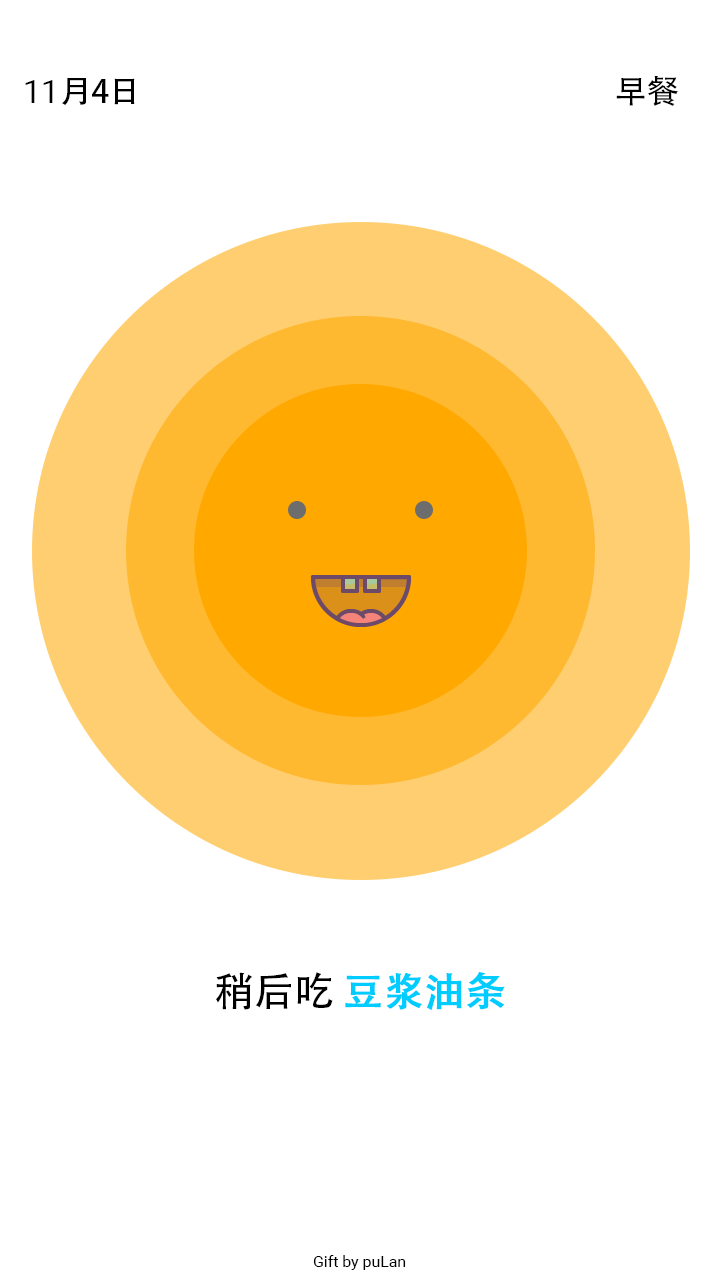
<style>
.page{position:relative;width:720px;height:1280px;background:#ffffff}
.page>*{position:absolute;margin:0}
.t1{font:32px "AdobeHeitiStd-Regular";letter-spacing:-0.004em;color:#000000}
.t2{font:32px "Roboto-Regular";letter-spacing:-0.004em;color:#000000}
.t3{font:40px "AdobeHeitiStd-Regular";letter-spacing:-0.004em;color:#00ccff;font-weight:bold}
.t4{font:40px "AdobeHeitiStd-Regular";letter-spacing:-0.004em;color:#000000}
.t5{font:16px "Roboto-Regular";letter-spacing:-0.004em;color:#000000}
</style>
<div class="page">
<p class="t1" style="left:25px;top:77px;width:110px;height:29px"><span class="t2">11</span>月4日</p>
<p class="t1" style="left:616px;top:75px;width:63px;height:31px">早餐</p>
<p class="t3" style="left:216px;top:972px;width:289px;height:38px"><span class="t4">稍后吃 </span>豆浆油条</p>
<p class="t5" style="left:313px;top:1255px;width:93px;height:15px">Gift by puLan</p>
</div>
